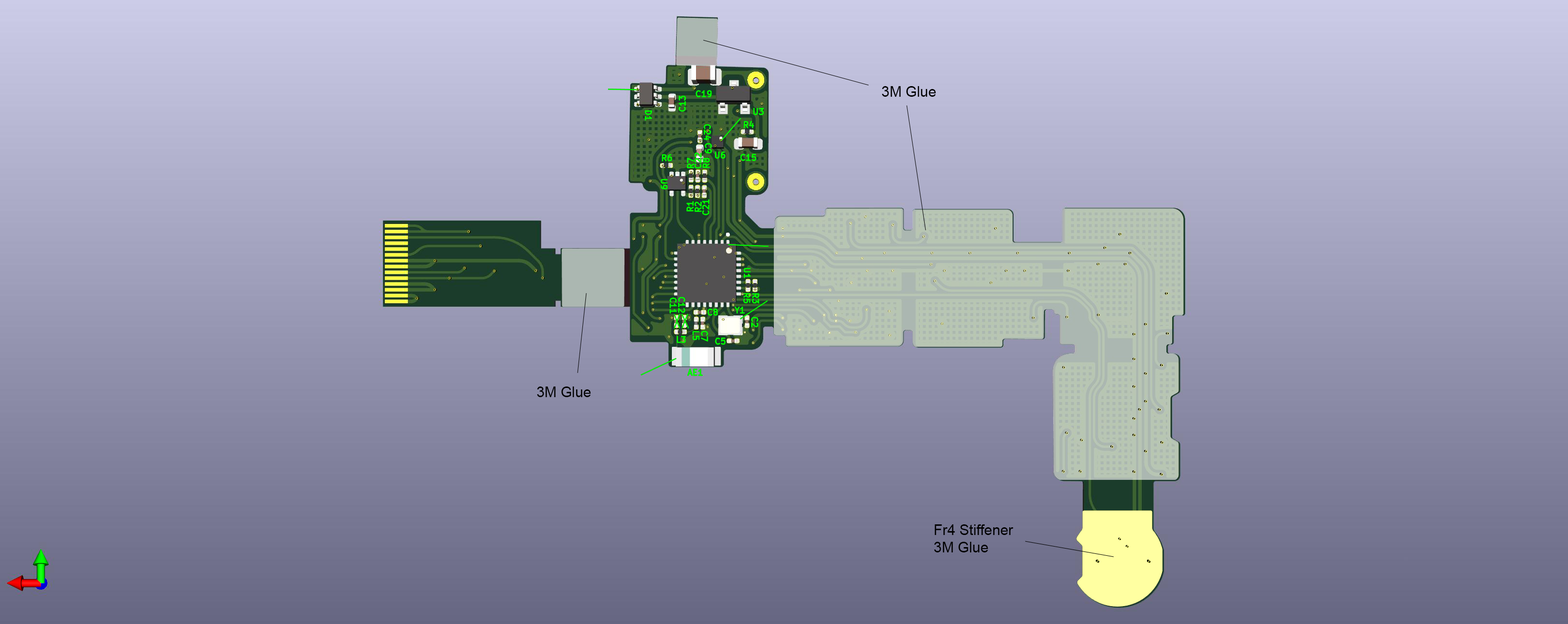
<style>
.page{position:relative;width:1568px;height:624px}
.page>*{position:absolute;margin:0}
.t1{font:14.5px "ArialMT";color:#000000}
</style>
<div class="page">
<p class="t1" style="left:882px;top:86px;width:54px;height:11px">3M Glue</p>
<p class="t1" style="left:537px;top:386px;width:54px;height:11px">3M Glue</p>
<p class="t1" style="left:934px;top:524px;width:80px;height:28px">Fr4 Stiffener<br>3M Glue</p>
</div>
